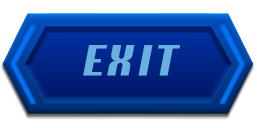
<style>
.page{position:relative;width:257px;height:128px;background:#ffffff}
.page>*{position:absolute;margin:0}
.t1{font:39.9px "Silom";color:#67b0e1;font-weight:bold;font-style:italic}
</style>
<div class="page">
<p class="t1" style="left:83px;top:45px;width:97px;height:31px">EXIT</p>
</div>
